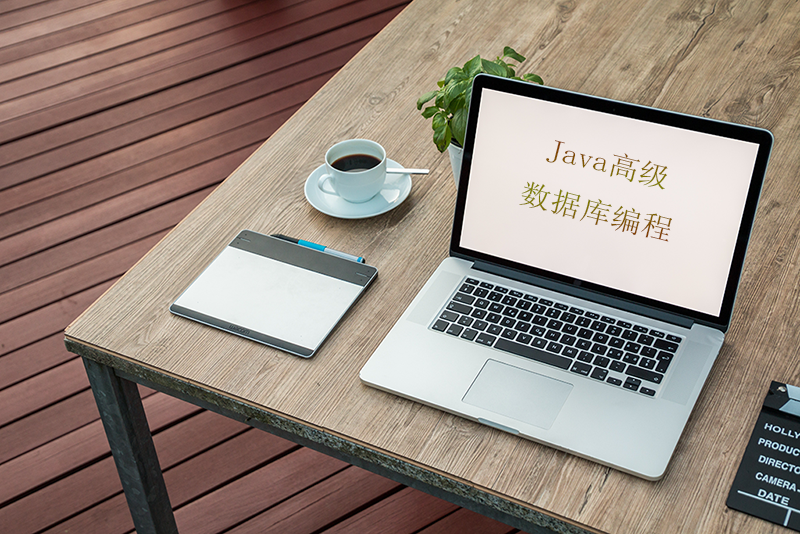
<style>
.page{position:relative;width:800px;height:534px}
.page>*{position:absolute;margin:0}
.t1{font:28.6px "SimSun";scale:1.1 1}
</style>
<div class="page">
<p class="t1" style="left:519px;top:140px;width:153px;height:102px;text-align:center;rotate:14deg">Java高级<br>数据库编程</p>
</div>
